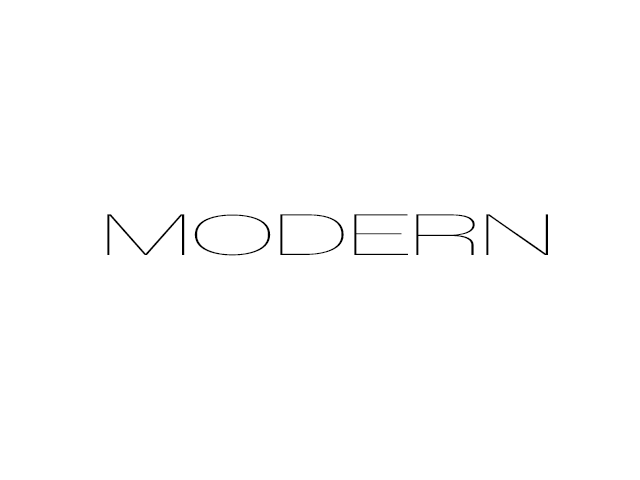
<style>
.page{position:relative;width:640px;height:480px;background:#ffffff}
.page>*{position:absolute;margin:0}
.t1{font:60px "WalkwayUltraExpand";color:#000000}
</style>
<div class="page">
<p class="t1" style="left:107px;top:214px;width:441px;height:42px">MODERN</p>
</div>
